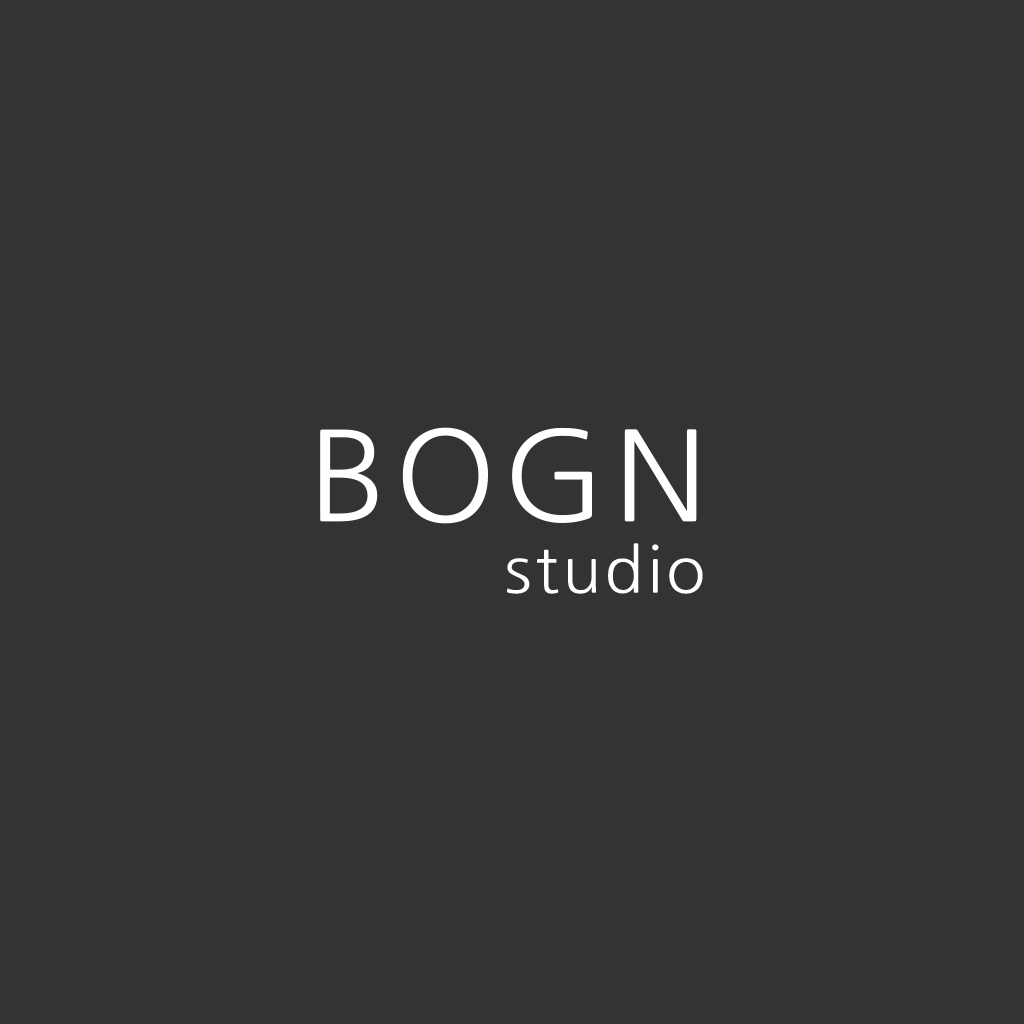
<style>
.page{position:relative;width:1024px;height:1024px;background:#333333}
.page>*{position:absolute;margin:0}
.t1{font:124.1px "NanumGothic";letter-spacing:0.05em;color:#ffffff;scale:1.05 1}
.t2{font:62px "NanumGothic";letter-spacing:0.05em;color:#ffffff;scale:1.05 1}
</style>
<div class="page">
<p class="t1" style="left:320px;top:427px;width:377px;height:97px">BOGN</p>
<p class="t2" style="left:507px;top:543px;width:196px;height:51px">studio</p>
</div>
